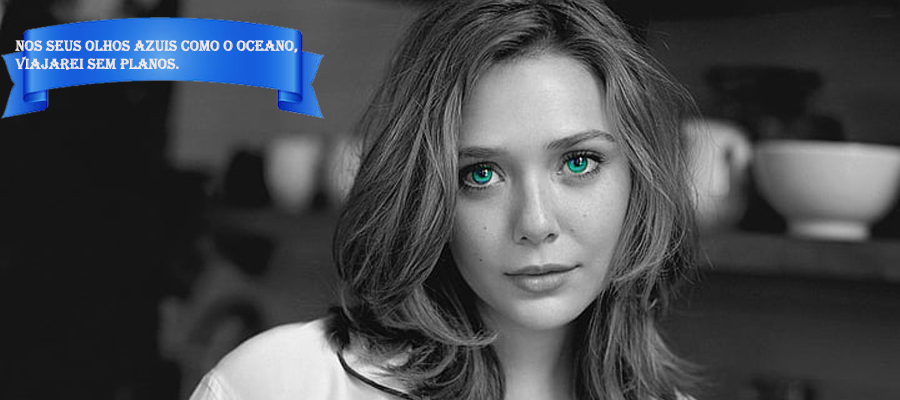
<style>
.page{position:relative;width:900px;height:400px}
.page>*{position:absolute;margin:0}
.t1{font:15.1px "Algerian";color:#efeaea}
</style>
<div class="page">
<p class="t1" style="left:15px;top:40px;width:283px;height:30px">NOS SEUS OLHOS AZUIS COMO O OCEANO, <br>VIAJAREI SEM PLANOS.</p>
</div>
